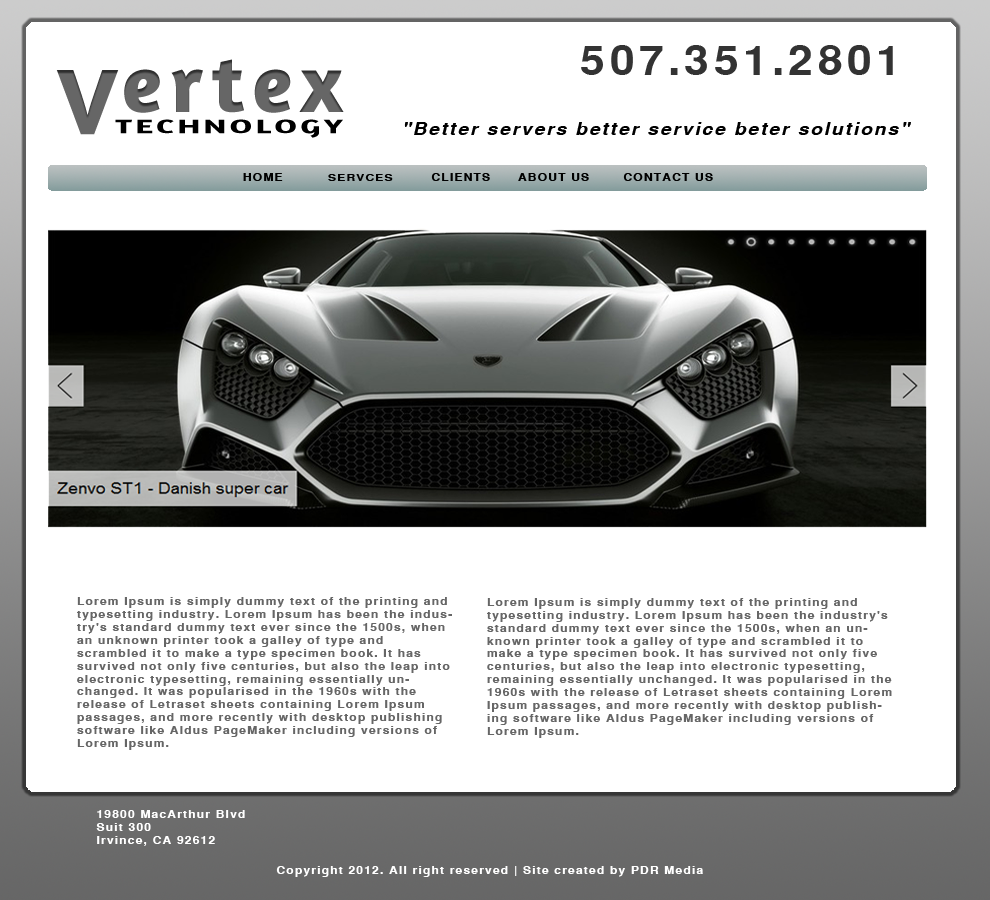
<style>
.page{position:relative;width:990px;height:900px;background:#ffffff}
.page>*{position:absolute;margin:0}
.t1{font:39.9px "SansSerifBold";letter-spacing:0.1em;color:#333333;scale:1.11 1}
.t2{font:83.1px "Amaranth-Bold";letter-spacing:0.1em;color:#666666}
.t3{font:95px "Amaranth-Bold";letter-spacing:0.1em;color:#666666}
.t4{font:19.8px "Amaranth-Bold";letter-spacing:0.1em;color:#000000;scale:1.67 1}
.t5{font:17.2px "SansSerifBoldOblique";letter-spacing:0.1em;color:#000000;scale:1.11 1}
.t6{font:10.8px "SansSerifBold";letter-spacing:0.1em;color:#000000;scale:1.11 1}
.t7{font:9.2px "SansSerifBold";letter-spacing:0.1em;color:#000000;scale:1.31 1}
.t8{font:10.8px "SansSerifBold";letter-spacing:0.1em;color:#666666;scale:1.11 1}
.t9{font:10.8px "SansSerifBold";letter-spacing:0.1em;color:#ffffff;scale:1.11 1}
</style>
<div class="page">
<p class="t1" style="left:581px;top:45px;width:312px;height:30px">507.351.2801</p>
<p class="t2" style="left:124px;top:59px;width:220px;height:54px">ertex</p>
<p class="t3" style="left:56px;top:70px;width:63px;height:65px">V</p>
<p class="t4" style="left:115px;top:119px;width:228px;height:19px">TECHNOLOGY</p>
<p class="t5" style="left:404px;top:122px;width:507px;height:13px">"Better servers better service beter solutions"</p>
<p class="t6" style="left:243px;top:173px;width:40px;height:8px">HOME</p>
<p class="t7" style="left:328px;top:174px;width:65px;height:7px">SERVCES</p>
<p class="t6" style="left:431px;top:173px;width:59px;height:8px">CLIENTS</p>
<p class="t6" style="left:518px;top:173px;width:71px;height:8px">ABOUT US</p>
<p class="t6" style="left:623px;top:173px;width:90px;height:8px">CONTACT US</p>
<p class="t8" style="left:77px;top:597px;width:375px;height:153px">Lorem Ipsum is simply dummy text of the printing and typesetting industry. Lorem Ipsum has been the industry's standard dummy text ever since the 1500s, when an unknown printer took a galley of type and scrambled it to make a type specimen book. It has survived not only five centuries, but also the leap into electronic typesetting, remaining essentially unchanged. It was popularised in the 1960s with the release of Letraset sheets containing Lorem Ipsum passages, and more recently with desktop publishing software like Aldus PageMaker including versions of Lorem Ipsum.</p>
<p class="t8" style="left:487px;top:598px;width:405px;height:140px">Lorem Ipsum is simply dummy text of the printing and typesetting industry. Lorem Ipsum has been the industry's standard dummy text ever since the 1500s, when an unknown printer took a galley of type and scrambled it to make a type specimen book. It has survived not only five centuries, but also the leap into electronic typesetting, remaining essentially unchanged. It was popularised in the 1960s with the release of Letraset sheets containing Lorem Ipsum passages, and more recently with desktop publishing software like Aldus PageMaker including versions of Lorem Ipsum.</p>
<p class="t9" style="left:96px;top:810px;width:149px;height:36px">19800 MacArthur Blvd<br>Suit 300<br>Irvince, CA 92612</p>
<p class="t9" style="left:276px;top:866px;width:427px;height:11px">Copyright 2012. All right reserved | Site created by PDR Media</p>
</div>
